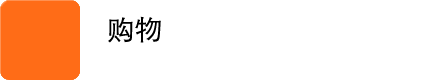
<style>
.page{position:relative;width:441px;height:81px;background:#ffffff}
.page>*{position:absolute;margin:0}
.t1{font:27.8px "STHeitiTC-Light";color:#000000}
</style>
<div class="page">
<p class="t1" style="left:108px;top:16px;width:53px;height:27px">购物</p>
</div>
